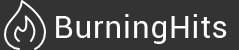
<style>
.page{position:relative;width:239px;height:50px;background:#333333}
.page>*{position:absolute;margin:0}
.t1{font:31.2px "Roboto-Regular";letter-spacing:0.025em;color:#ffffff}
</style>
<div class="page">
<p class="t1" style="left:56px;top:14px;width:171px;height:30px">BurningHits</p>
</div>
